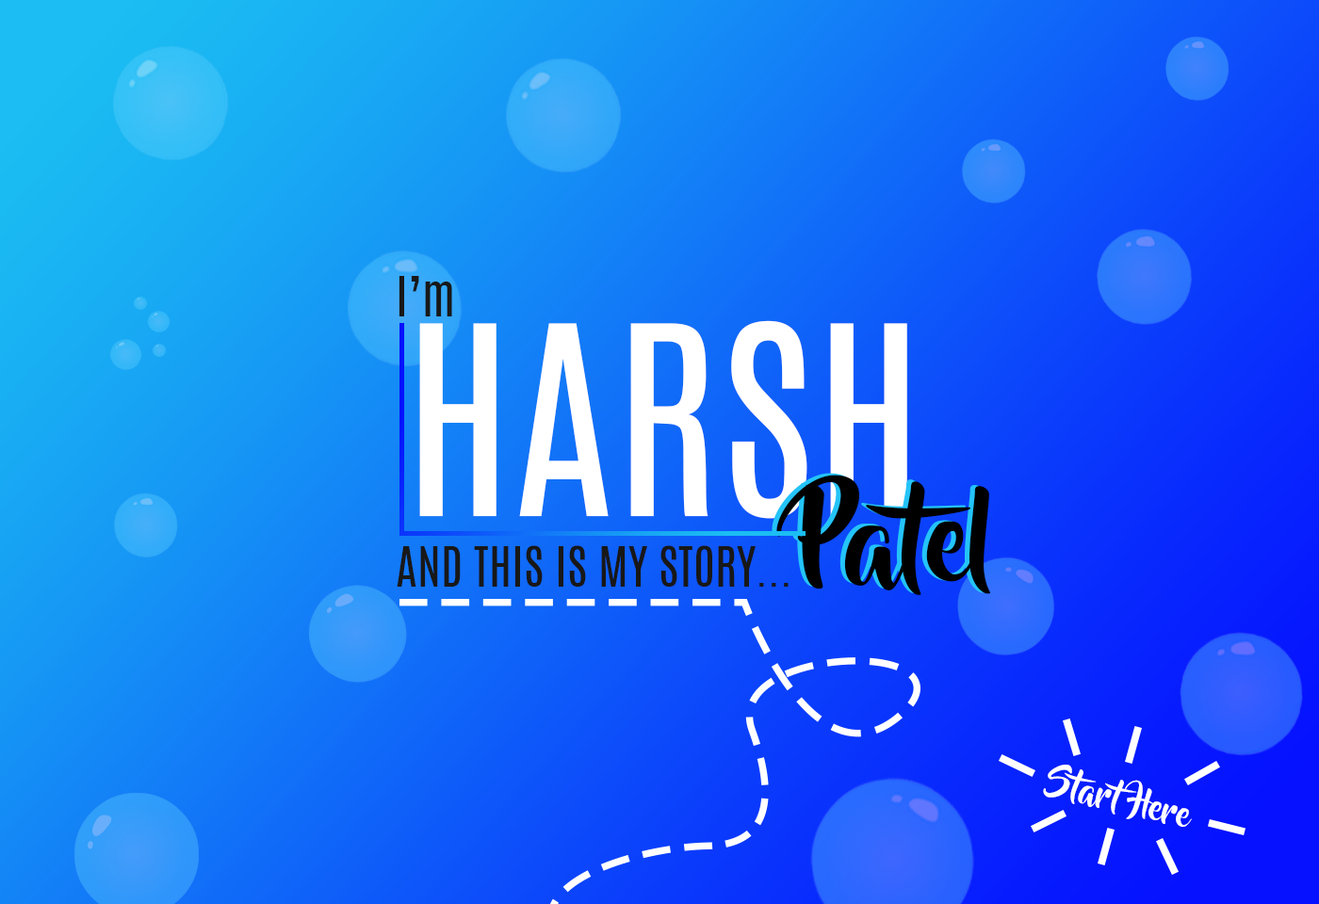
<style>
.page{position:relative;width:1319px;height:904px}
.page>*{position:absolute;margin:0}
.t1{font:46.9px "Antonio-Regular";color:#181818}
.t2{font:224.6px "Antonio-Regular";color:#ffffff}
.t3{font:111.8px "BeyondTheMountains"}
.t4{font:111.8px "BeyondTheMountains";color:#000000}
.t5{font:34.8px "BeyondTheMountains";color:#ffffff}
</style>
<div class="page">
<p class="t1" style="left:398px;top:276px;width:54px;height:40px">I’m</p>
<p class="t2" style="left:419px;top:320px;width:488px;height:199px">HARSH</p>
<p class="t3" style="left:771px;top:473px;width:214px;height:120px">Patel</p>
<p class="t4" style="left:776px;top:475px;width:214px;height:120px">Patel</p>
<p class="t1" style="left:397px;top:545px;width:391px;height:42px">AND THIS IS MY STORY...</p>
<p class="t5" style="left:1043px;top:765px;width:149px;height:62px;rotate:14deg">Start Here</p>
</div>
